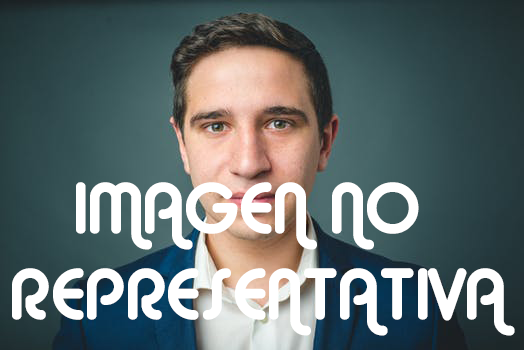
<style>
.page{position:relative;width:524px;height:350px}
.page>*{position:absolute;margin:0}
.t1{font:72px "Alba";color:#ffffff}
</style>
<div class="page">
<p class="t1" style="left:12px;top:182px;width:503px;height:154px;text-align:center">IMAGEN NO <br>REPRESENTATIVA</p>
</div>
